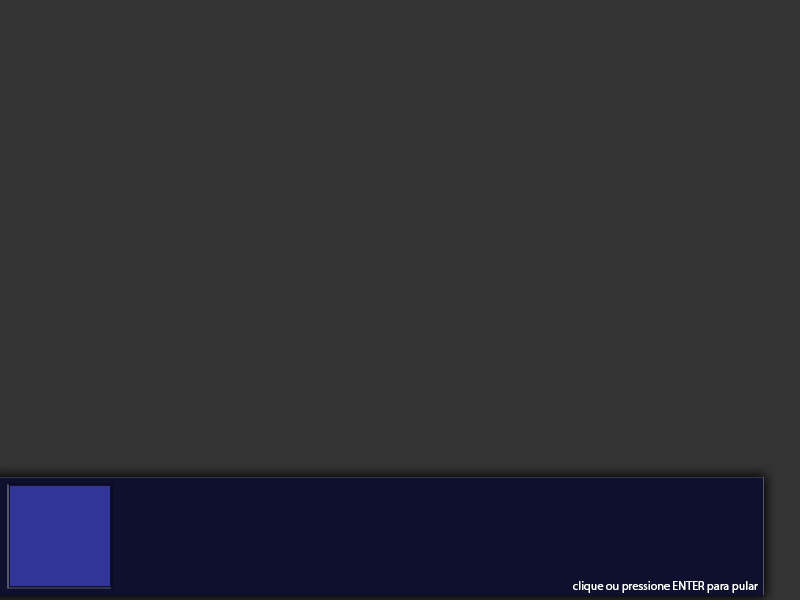
<style>
.page{position:relative;width:800px;height:600px;background:#333333}
.page>*{position:absolute;margin:0}
.t1{font:12px "MyriadPro-Regular";color:#ffffff}
</style>
<div class="page">
<p class="t1" style="left:573px;top:581px;width:185px;height:12px">clique ou pressione ENTER para pular</p>
</div>
